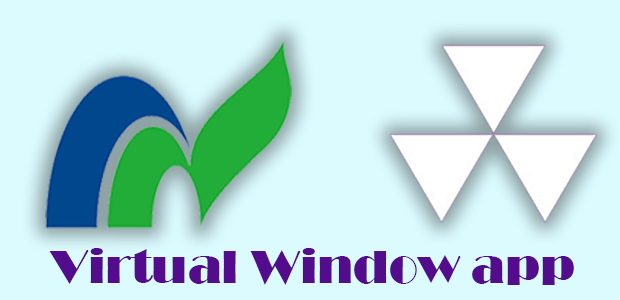
<style>
.page{position:relative;width:620px;height:300px;background:#dbfbff}
.page>*{position:absolute;margin:0}
.t1{font:48px "Broadway";color:#520c8c}
</style>
<div class="page">
<p class="t1" style="left:49px;top:248px;width:525px;height:37px">Virtual Window app</p>
</div>
